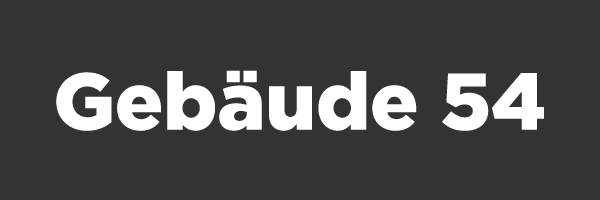
<style>
.page{position:relative;width:600px;height:200px;background:#333333}
.page>*{position:absolute;margin:0}
.t1{font:80px "Gotham-Black";color:#ffffff}
</style>
<div class="page">
<p class="t1" style="left:56px;top:70px;width:488px;height:61px">Gebäude 54</p>
</div>
